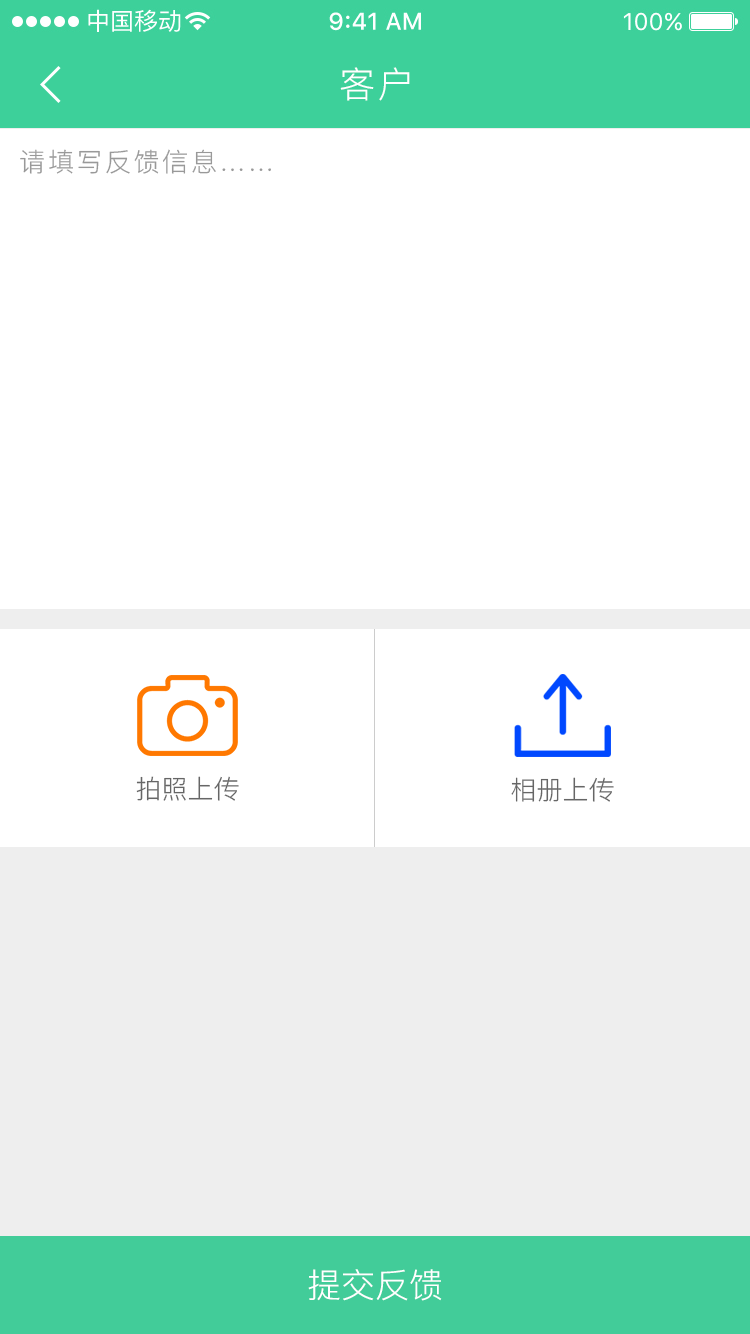
<style>
.page{position:relative;width:750px;height:1334px;background:#ffffff}
.page>*{position:absolute;margin:0}
.t1{font:36px "PingFang-SC-Regular";letter-spacing:0.1em;color:#ffffff}
.t2{font:26px "PingFang-SC-Regular";letter-spacing:0.1em;color:#999999}
.t3{font:26px "PingFang-SC-Regular";color:#666666}
.t4{font:34px "PingFang-SC-Regular";color:#ffffff}
</style>
<div class="page">
<p class="t1" style="left:340px;top:67px;width:70px;height:34px">客户</p>
<p class="t2" style="left:20px;top:149px;width:251px;height:25px">请填写反馈信息……</p>
<p class="t3" style="left:136px;top:776px;width:103px;height:25px">拍照上传</p>
<p class="t3" style="left:511px;top:777px;width:103px;height:25px">相册上传</p>
<p class="t4" style="left:308px;top:1269px;width:134px;height:32px">提交反馈</p>
</div>
